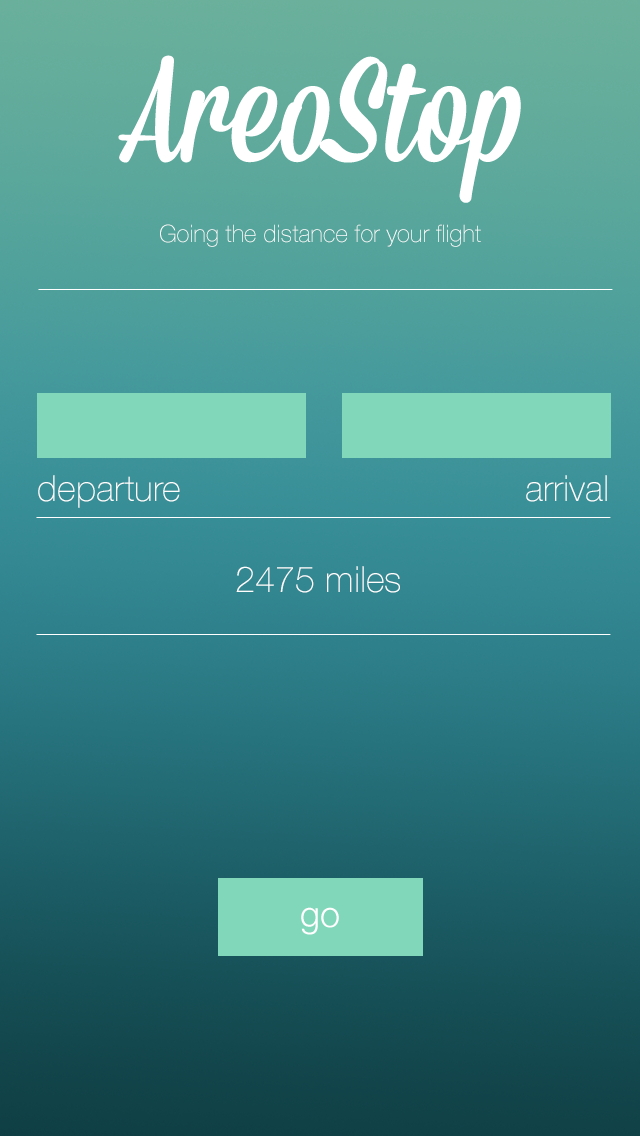
<style>
.page{position:relative;width:640px;height:1136px}
.page>*{position:absolute;margin:0}
.t1{font:24px "HelveticaNeue-Thin";color:#ffffff}
.t2{font:36px "HelveticaNeue-Thin";color:#ffffff}
.t3{font:36px "HelveticaNeue-Light";color:#ffffff}
</style>
<div class="page">
<p class="t1" style="left:160px;top:224px;width:321px;height:23px">Going the distance for your flight</p>
<p class="t2" style="left:38px;top:475px;width:142px;height:33px">departure</p>
<p class="t2" style="left:526px;top:475px;width:81px;height:27px">arrival</p>
<p class="t2" style="left:236px;top:566px;width:164px;height:27px">2475 miles</p>
<p class="t3" style="left:301px;top:907px;width:38px;height:28px">go</p>
</div>
